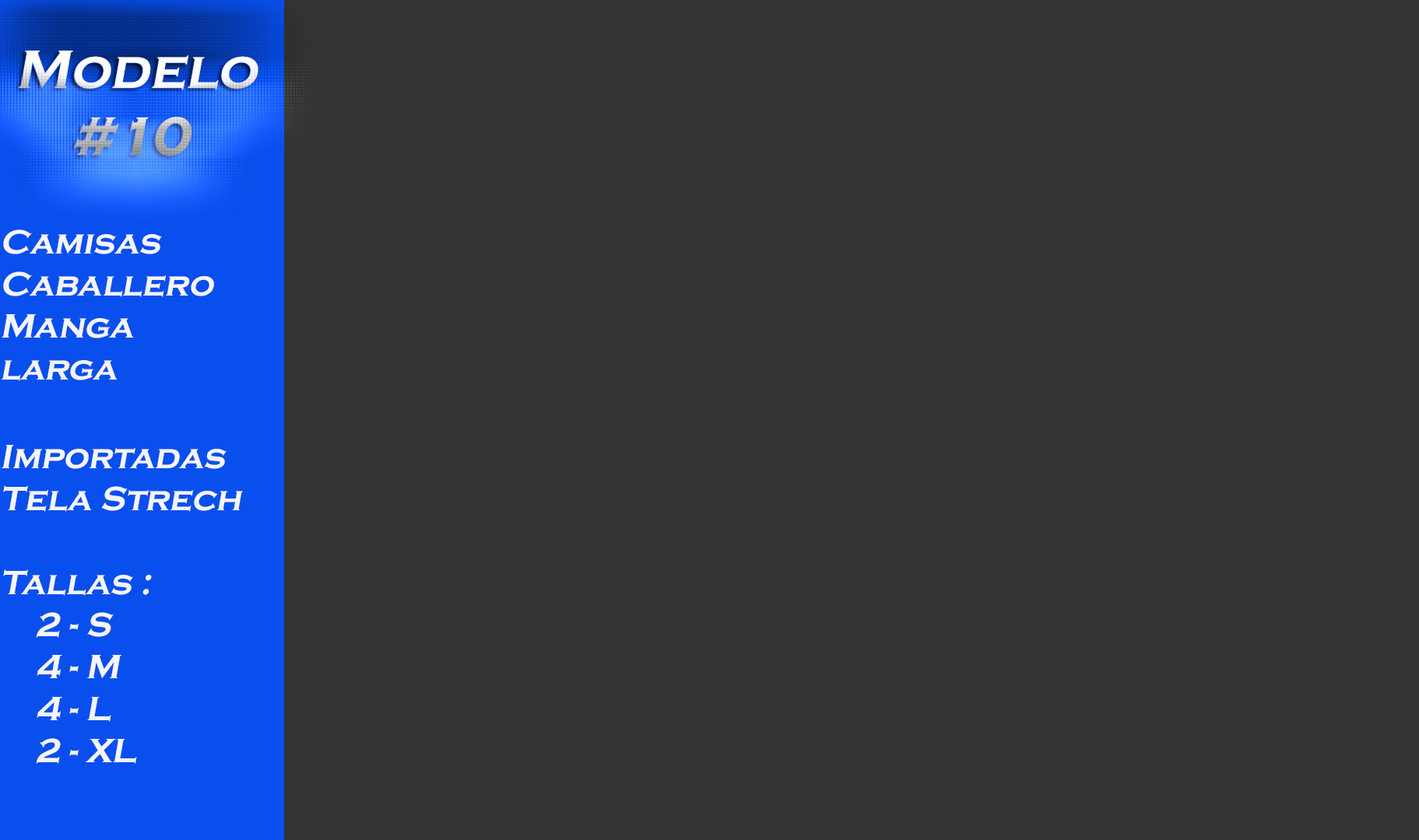
<style>
.page{position:relative;width:1419px;height:840px;background:#333333}
.page>*{position:absolute;margin:0}
.t1{font:56px "CopperplateGothic-Bold";font-style:italic}
.t2{font:35px "CopperplateGothic-Bold";color:#f5f6fa;font-style:italic}
</style>
<div class="page">
<p class="t1" style="left:19px;top:51px;width:239px;height:105px">Modelo <br>     #10</p>
<p class="t2" style="left:2px;top:230px;width:241px;height:534px">Camisas<br>Caballero<br>Manga <br>larga<br><br>Importadas<br>Tela Strech<br><br>Tallas :<br>    2 - S<br>    4 - M<br>    4 - L<br>    2 - XL</p>
</div>
